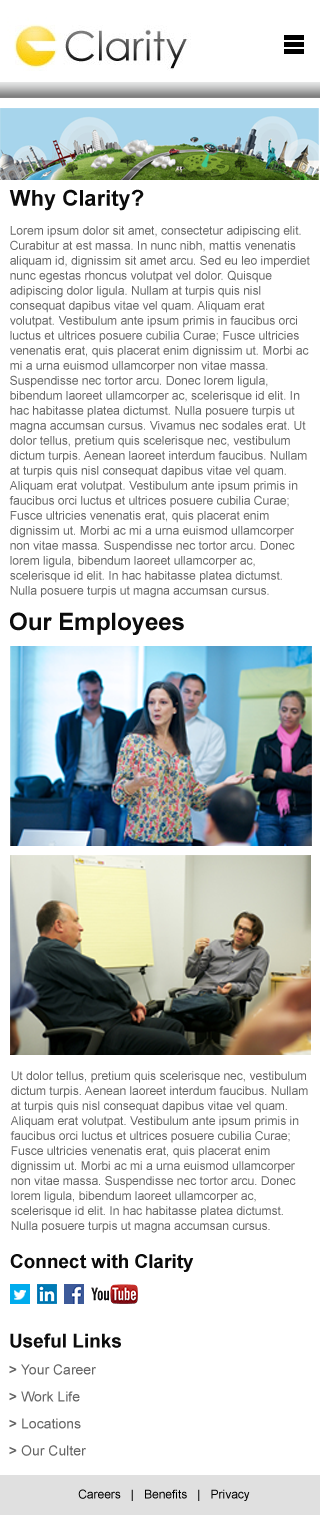
<style>
.page{position:relative;width:320px;height:1515px;background:#ffffff}
.page>*{position:absolute;margin:0}
.t1{font:12px/15px "ArialMT";color:#666666}
.t2{font:22px/14px "Arial-BoldMT";color:#0c0c0c}
.t3{font:24px "Arial-BoldMT";color:#0c0c0c}
.t4{font:24px/14px "MyriadPro-SemiboldIt";color:#f97c0b}
.t5{font:19px "Arial-BoldMT";color:#0c0c0c}
.t6{font:19px/14px "Arial-BoldMT";color:#0c0c0c}
.t7{font:14px/27px "Arial-BoldMT";color:#666666}
.t8{font:14px/27px "ArialMT";color:#666666}
.t9{font:12px "ArialMT";color:#000000}
</style>
<div class="page">
<p class="t1" style="left:9px;top:189px;width:301px;height:409px"><span class="t2">Why Clarity?<br><br></span>Lorem ipsum dolor sit amet, consectetur adipiscing elit. Curabitur at est massa. In nunc nibh, mattis venenatis aliquam id, dignissim sit amet arcu. Sed eu leo imperdiet nunc egestas rhoncus volutpat vel dolor. Quisque adipiscing dolor ligula. Nullam at turpis quis nisl consequat dapibus vitae vel quam. Aliquam erat volutpat. Vestibulum ante ipsum primis in faucibus orci luctus et ultrices posuere cubilia Curae; Fusce ultricies venenatis erat, quis placerat enim dignissim ut. Morbi ac mi a urna euismod ullamcorper non vitae massa. Suspendisse nec tortor arcu. Donec lorem ligula, bibendum laoreet ullamcorper ac, scelerisque id elit. In hac habitasse platea dictumst. Nulla posuere turpis ut magna accumsan cursus. Vivamus nec sodales erat. Ut dolor tellus, pretium quis scelerisque nec, vestibulum dictum turpis. Aenean laoreet interdum faucibus. Nullam at turpis quis nisl consequat dapibus vitae vel quam. Aliquam erat volutpat. Vestibulum ante ipsum primis in faucibus orci luctus et ultrices posuere cubilia Curae; Fusce ultricies venenatis erat, quis placerat enim dignissim ut. Morbi ac mi a urna euismod ullamcorper non vitae massa. Suspendisse nec tortor arcu. Donec lorem ligula, bibendum laoreet ullamcorper ac, scelerisque id elit. In hac habitasse platea dictumst. Nulla posuere turpis ut magna accumsan cursus.</p>
<p class="t3" style="left:10px;top:612px;width:174px;height:23px">Our Employees</p>
<p class="t1" style="left:10px;top:1071px;width:298px;height:162px"><span class="t4"><br></span>Ut dolor tellus, pretium quis scelerisque nec, vestibulum dictum turpis. Aenean laoreet interdum faucibus. Nullam at turpis quis nisl consequat dapibus vitae vel quam. Aliquam erat volutpat. Vestibulum ante ipsum primis in faucibus orci luctus et ultrices posuere cubilia Curae; Fusce ultricies venenatis erat, quis placerat enim dignissim ut. Morbi ac mi a urna euismod ullamcorper non vitae massa. Suspendisse nec tortor arcu. Donec lorem ligula, bibendum laoreet ullamcorper ac, scelerisque id elit. In hac habitasse platea dictumst. Nulla posuere turpis ut magna accumsan cursus.</p>
<p class="t5" style="left:10px;top:1254px;width:184px;height:18px">Connect with Clarity</p>
<p class="t6" style="left:9px;top:1333px;width:112px;height:123px">Useful Links<br><span class="t7">&gt;</span><span class="t8"> Your Career<br></span><span class="t7">&gt;</span><span class="t8"> Work Life<br></span><span class="t7">&gt; </span><span class="t8">Locations<br></span><span class="t7">&gt;</span><span class="t8"> Our Culter</span></p>
<p class="t9" style="left:78px;top:1489px;width:172px;height:12px">Careers   |   Benefits   |   Privacy</p>
</div>
